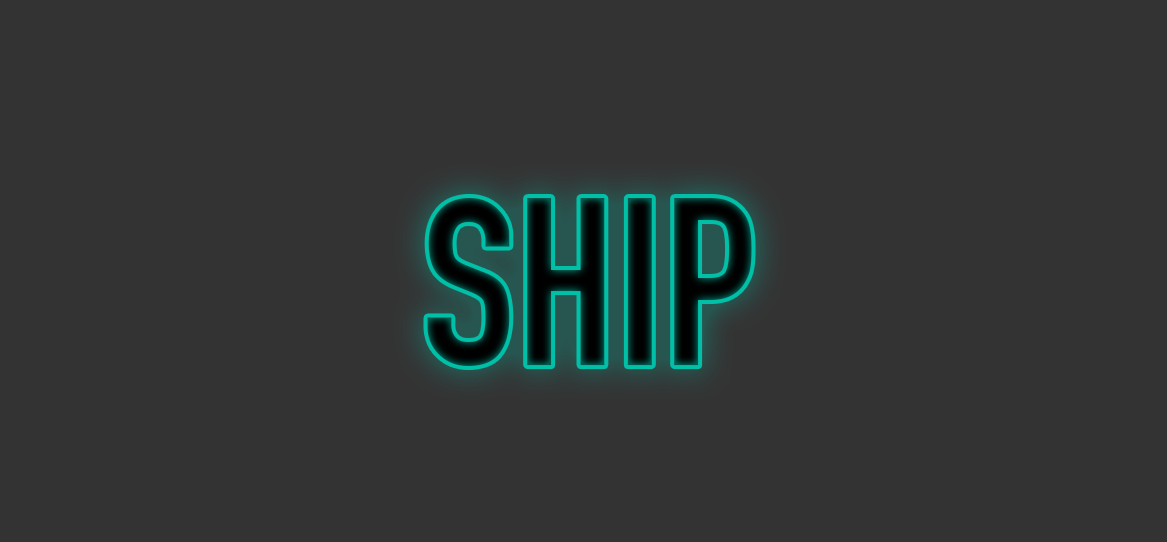
<style>
.page{position:relative;width:1167px;height:542px;background:#333333}
.page>*{position:absolute;margin:0}
.t1{font:233.7px "DINEngschrift";text-transform:uppercase}
</style>
<div class="page">
<p class="t1" style="left:427px;top:198px;width:325px;height:168px">ship</p>
</div>
